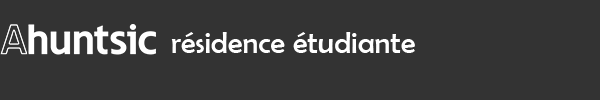
<style>
.page{position:relative;width:600px;height:100px;background:#333333}
.page>*{position:absolute;margin:0}
.t1{font:30.3px "BerlinSansFB-Reg";color:#ffffff}
</style>
<div class="page">
<p class="t1" style="left:171px;top:32px;width:244px;height:21px">résidence étudiante</p>
</div>
